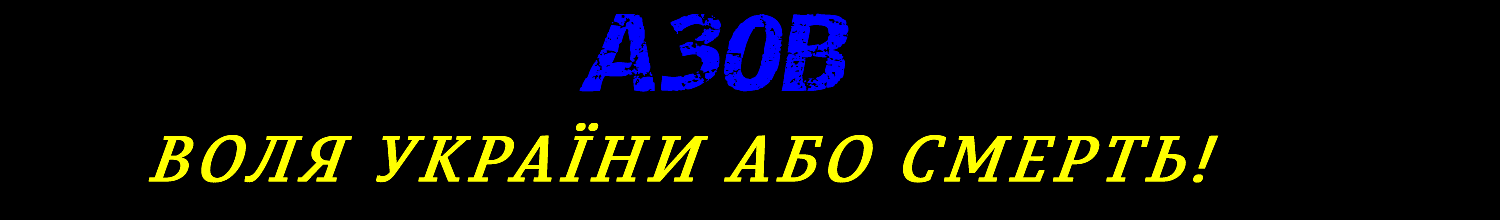
<style>
.page{position:relative;width:1500px;height:220px;background:#000000}
.page>*{position:absolute;margin:0}
.t1{font:77px "Destroy";color:#0000ff;font-style:italic}
.t2{font:65px "PermianSlabSerifTypeface-Italic";letter-spacing:0.081em;color:#ffff00;text-transform:uppercase;font-weight:bold;font-style:italic}
</style>
<div class="page">
<p class="t1" style="left:579px;top:13px;width:270px;height:79px">A30B</p>
<p class="t2" style="left:148px;top:122px;width:1071px;height:61px">Воля України або смерть!</p>
</div>
